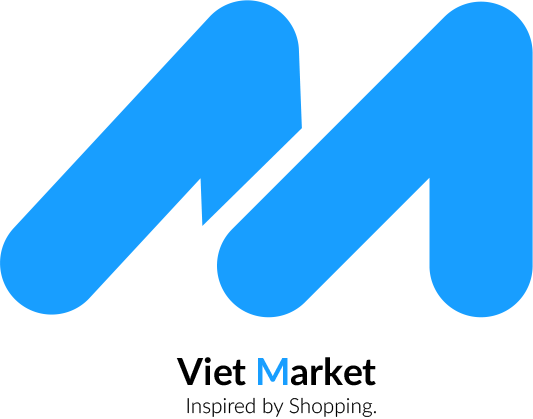
<style>
.page{position:relative;width:533px;height:419px;background:#ffffff}
.page>*{position:absolute;margin:0}
.t1{font:37.5px "Lato-Bold";color:#000000}
.t2{font:37.5px "Lato-Bold";color:#189eff}
.t3{font:20.8px "Lato-Light";color:#000000}
</style>
<div class="page">
<p class="t1" style="left:176px;top:357px;width:200px;height:29px">Viet <span class="t2">M</span>arket</p>
<p class="t3" style="left:187px;top:397px;width:189px;height:20px">Inspired by Shopping.</p>
</div>
